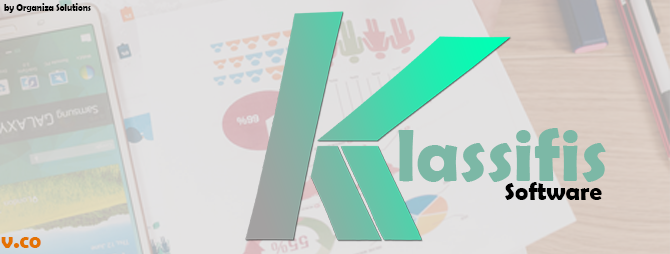
<style>
.page{position:relative;width:670px;height:254px}
.page>*{position:absolute;margin:0}
.t1{font:9.6px "BerlinSansFBDemi-Bold";color:#000000;scale:0.94 1}
.t2{font:75px "BerlinSansFBDemi-Bold";color:#7cb8a6}
.t3{font:25px "BerlinSansFBDemi-Bold";color:#000000}
.t4{font:22.9px "BerlinSansFBDemi-Bold";color:#e47202}
</style>
<div class="page">
<p class="t1" style="left:4px;top:3px;width:87px;height:10px">by Organiza Solutions</p>
<p class="t2" style="left:398px;top:128px;width:208px;height:54px">lassifis</p>
<p class="t3" style="left:505px;top:182px;width:97px;height:18px">Software</p>
<p class="t4" style="left:1px;top:237px;width:40px;height:11px">v.co</p>
</div>
